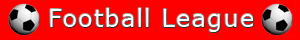
<style>
.page{position:relative;width:300px;height:40px;background:#ff0000}
.page>*{position:absolute;margin:0}
.t1{font:24px "Verdana";letter-spacing:0.05em;color:#ffffff}
</style>
<div class="page">
<p class="t1" style="left:50px;top:8px;width:204px;height:24px">Football League</p>
</div>
